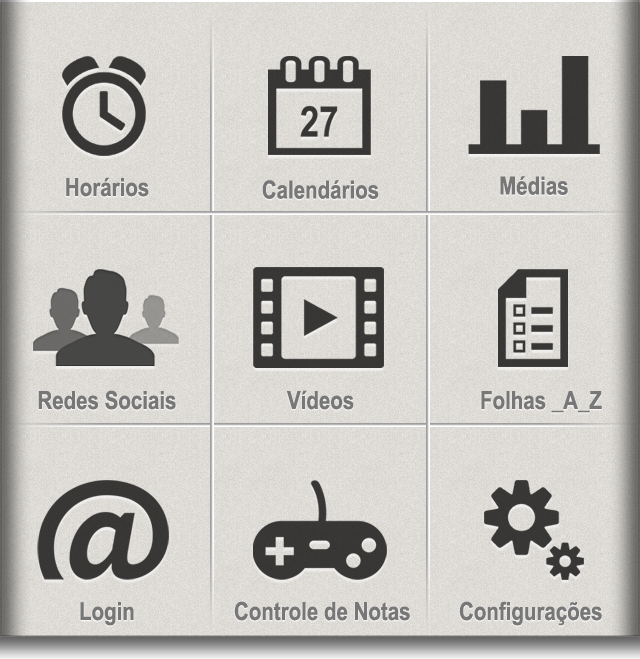
<style>
.page{position:relative;width:640px;height:659px}
.page>*{position:absolute;margin:0}
.t1{font:25px "ArialNarrow-Bold";color:#777777}
</style>
<div class="page">
<p class="t1" style="left:66px;top:177px;width:83px;height:20px">Horários</p>
<p class="t1" style="left:262px;top:180px;width:117px;height:19px">Calendários</p>
<p class="t1" style="left:500px;top:176px;width:68px;height:19px">Médias</p>
<p class="t1" style="left:38px;top:390px;width:138px;height:20px">Redes Sociais</p>
<p class="t1" style="left:287px;top:390px;width:67px;height:20px">Vídeos</p>
<p class="t1" style="left:481px;top:391px;width:121px;height:22px">Folhas _A_Z</p>
<p class="t1" style="left:80px;top:602px;width:54px;height:24px">Login</p>
<p class="t1" style="left:234px;top:601px;width:176px;height:20px">Controle de Notas</p>
<p class="t1" style="left:459px;top:601px;width:143px;height:25px">Configurações</p>
</div>
